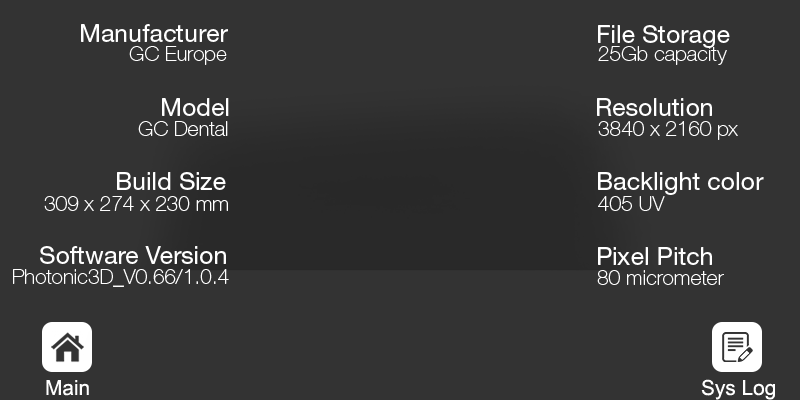
<style>
.page{position:relative;width:800px;height:400px;background:#333333}
.page>*{position:absolute;margin:0}
.t1{font:25px "HelveticaNeue-Roman";color:#ffffff}
.t2{font:20.8px "HelveticaNeueLTStd-Th";color:#ffffff}
.t3{font:20.8px "ArialMT";color:#ffffff}
</style>
<div class="page">
<p class="t1" style="left:81px;top:24px;width:147px;height:18px">Manufacturer</p>
<p class="t1" style="left:598px;top:25px;width:132px;height:23px">File Storage</p>
<p class="t2" style="left:129px;top:46px;width:98px;height:19px">GC Europe</p>
<p class="t2" style="left:598px;top:46px;width:129px;height:19px">25Gb capacity</p>
<p class="t1" style="left:162px;top:98px;width:67px;height:18px">Model</p>
<p class="t1" style="left:597px;top:98px;width:115px;height:18px">Resolution</p>
<p class="t2" style="left:138px;top:121px;width:90px;height:15px">GC Dental</p>
<p class="t2" style="left:598px;top:121px;width:140px;height:19px">3840 x 2160 px</p>
<p class="t1" style="left:117px;top:172px;width:109px;height:18px">Build Size</p>
<p class="t1" style="left:598px;top:172px;width:166px;height:23px">Backlight color</p>
<p class="t2" style="left:44px;top:196px;width:184px;height:15px">309 x 274 x 230 mm</p>
<p class="t2" style="left:598px;top:196px;width:67px;height:15px">405 UV</p>
<p class="t1" style="left:40px;top:246px;width:186px;height:18px">Software Version</p>
<p class="t1" style="left:598px;top:247px;width:114px;height:18px">Pixel Pitch</p>
<p class="t2" style="left:13px;top:269px;width:216px;height:18px">Photonic3D_V0.66/1.0.4</p>
<p class="t2" style="left:597px;top:270px;width:127px;height:15px">80 micrometer</p>
<p class="t3" style="left:46px;top:380px;width:43px;height:16px">Main</p>
<p class="t3" style="left:701px;top:379px;width:74px;height:21px">Sys Log</p>
</div>
